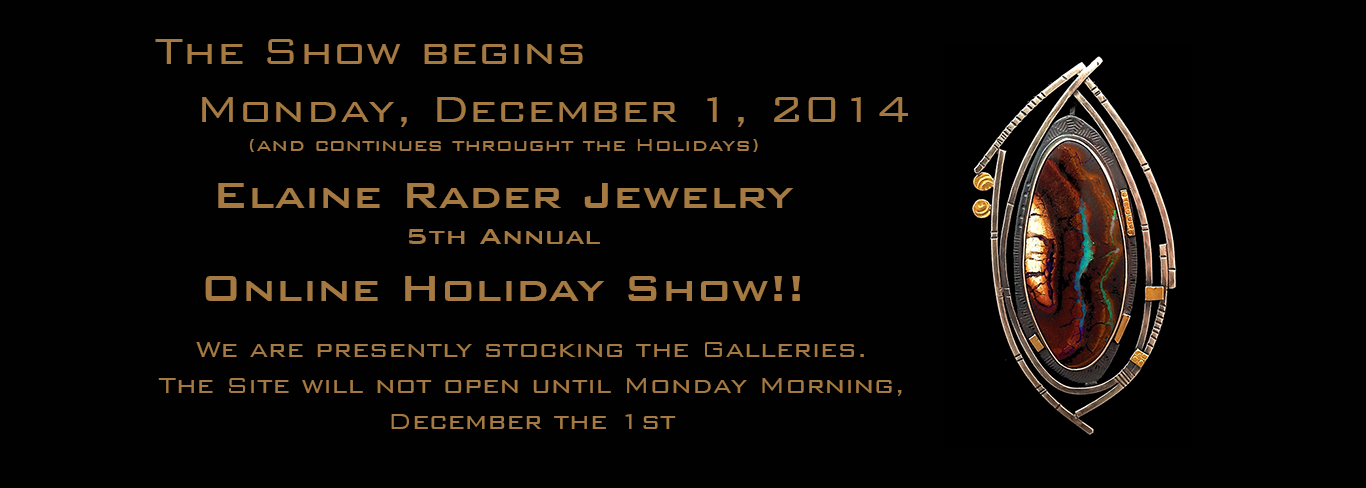
<style>
.page{position:relative;width:1366px;height:488px;background:#010101}
.page>*{position:absolute;margin:0}
.t1{font:48px "BankGothicBT-Light";color:#a47942}
.t2{font:24px "BankGothicBT-Light";color:#a47942}
.t3{font:48px "BankGothicBT-Medium";color:#a47942}
.t4{font:30px "BankGothicBT-Medium";color:#a47942}
.t5{font:30px "BankGothicBT-Light";color:#a47942}
</style>
<div class="page">
<p class="t1" style="left:155px;top:39px;width:753px;height:113px">The Show begins<br>   Monday, December 1, 2014<br>            <span class="t2">(and continues throught the Holidays)</span></p>
<p class="t3" style="left:205px;top:183px;width:595px;height:118px;text-align:center">Elaine Rader Jewelry <br><span class="t4">5th Annual<br></span>Online Holiday Show!!</p>
<p class="t5" style="left:158px;top:342px;width:744px;height:87px;text-align:center">We are presently stocking the Galleries.   The Site will not open until Monday Morning,    December the 1st</p>
</div>
